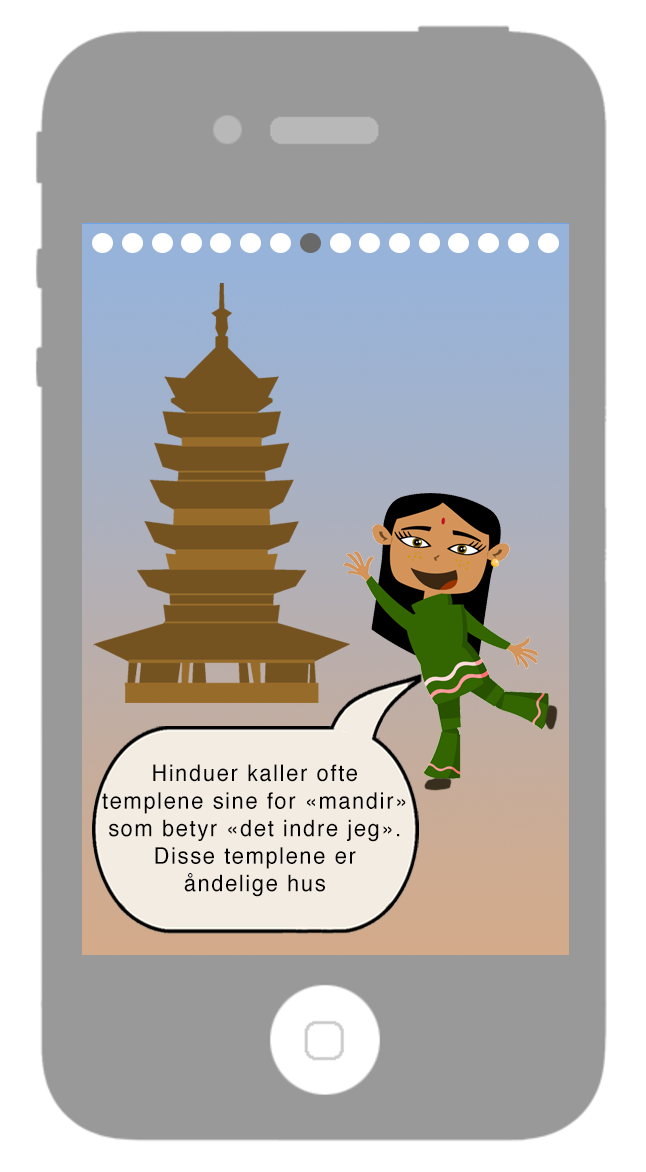
<style>
.page{position:relative;width:646px;height:1172px;background:#999999}
.page>*{position:absolute;margin:0}
.t1{font:11px "Helvetica";letter-spacing:0.075em;color:#010101;scale:0.95 1}
</style>
<div class="page">
<p class="t1" style="left:102px;top:764px;width:304px;height:133px;text-align:center">Hinduer kaller ofte<br> templene sine for «mandir» <br>som betyr «det indre jeg».<br>Disse templene er<br>åndelige hus</p>
</div>
